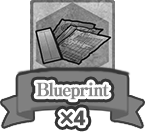
<style>
.page{position:relative;width:145px;height:132px;background:#ffffff}
.page>*{position:absolute;margin:0}
.t1{font:18px "RyuminPro-ExBold";letter-spacing:-0.08em;color:#848484;font-weight:bold}
.t2{font:18px "UDShinGoPro-Bold";letter-spacing:-0.08em;color:#505050;font-weight:bold}
</style>
<div class="page">
<p class="t1" style="left:36px;top:82px;width:73px;height:18px">Blueprint</p>
<p class="t2" style="left:60px;top:110px;width:26px;height:16px">×4</p>
</div>
